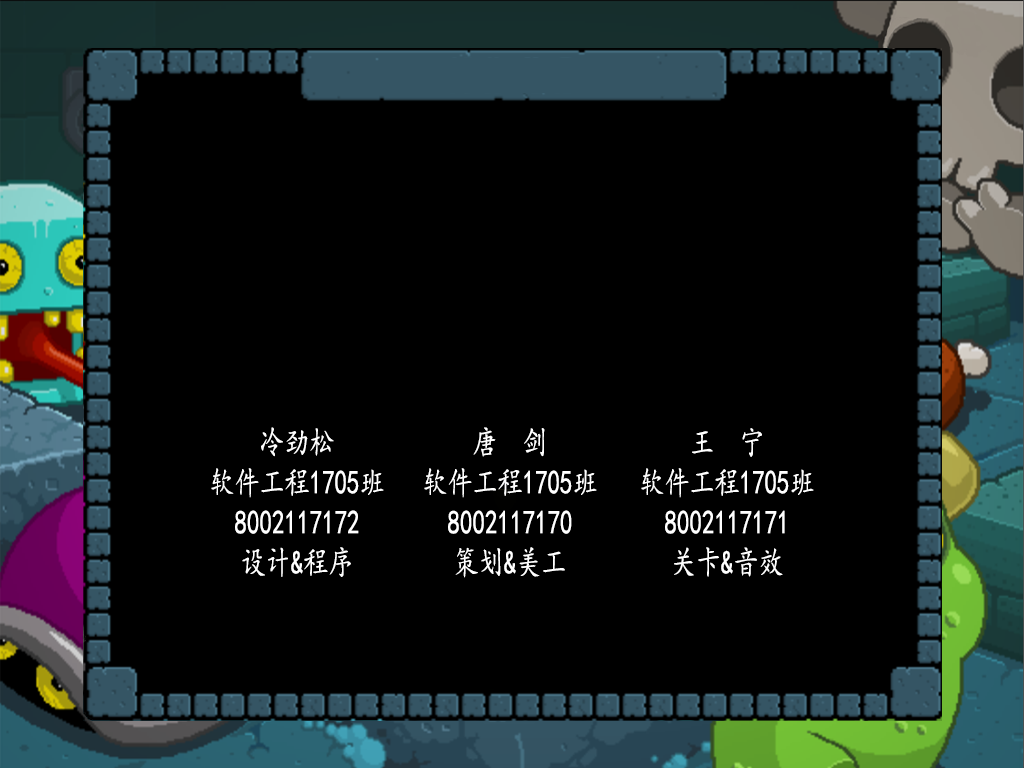
<style>
.page{position:relative;width:1024px;height:768px;background:#000000}
.page>*{position:absolute;margin:0}
.t1{font:33.3px "KaiTi";color:#ffffff}
</style>
<div class="page">
<p class="t1" style="left:211px;top:427px;width:173px;height:150px;text-align:center">冷劲松<br>软件工程1705班<br>8002117172<br>设计&amp;程序</p>
<p class="t1" style="left:424px;top:427px;width:173px;height:151px;text-align:center">唐  剑<br>软件工程1705班<br>8002117170<br>策划&amp;美工</p>
<p class="t1" style="left:641px;top:428px;width:173px;height:149px;text-align:center">王  宁<br>软件工程1705班<br>8002117171<br>关卡&amp;音效</p>
</div>
